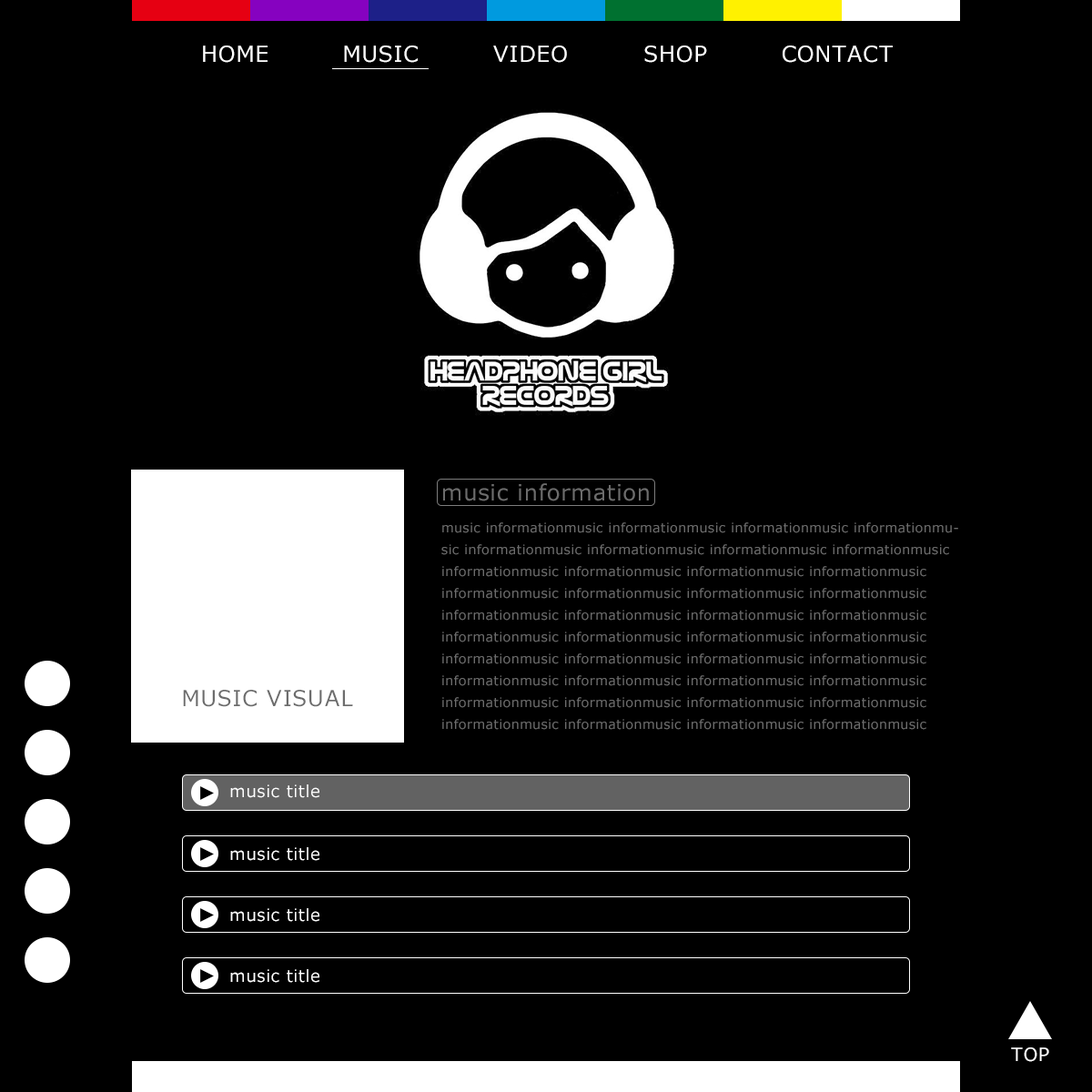
<style>
.page{position:relative;width:1092px;height:1092px;background:#000000}
.page>*{position:absolute;margin:0}
.t1{font:21.8px "Meiryo";letter-spacing:0.05em;color:#ffffff}
.t2{font:21.8px "Meiryo";letter-spacing:0.05em;color:#6c6c6c}
.t3{font:12.7px/21.8px "Meiryo";letter-spacing:0.05em;color:#6c6c6c}
.t4{font:16.4px "Meiryo";letter-spacing:0.05em;color:#ffffff}
.t5{font:18.2px "Meiryo";letter-spacing:0.05em;color:#ffffff}
</style>
<div class="page">
<p class="t1" style="left:203px;top:45px;width:65px;height:18px">HOME</p>
<p class="t1" style="left:344px;top:45px;width:74px;height:18px">MUSIC</p>
<p class="t1" style="left:493px;top:45px;width:74px;height:18px">VIDEO</p>
<p class="t1" style="left:644px;top:45px;width:63px;height:18px">SHOP</p>
<p class="t1" style="left:783px;top:45px;width:110px;height:18px">CONTACT</p>
<p class="t2" style="left:443px;top:483px;width:206px;height:18px">music information</p>
<p class="t3" style="left:441px;top:522px;width:517px;height:208px">music informationmusic informationmusic informationmusic informationmusic informationmusic informationmusic informationmusic informationmusic informationmusic informationmusic informationmusic informationmusic informationmusic informationmusic informationmusic informationmusic informationmusic informationmusic informationmusic informationmusic informationmusic informationmusic informationmusic informationmusic informationmusic informationmusic informationmusic informationmusic informationmusic informationmusic informationmusic informationmusic informationmusic informationmusic informationmusic informationmusic informationmusic informationmusic informationmusic informationmusic informationmusic informationmusic informationmusic information</p>
<p class="t2" style="left:183px;top:690px;width:170px;height:17px">MUSIC VISUAL</p>
<p class="t4" style="left:230px;top:784px;width:89px;height:14px">music title</p>
<p class="t4" style="left:230px;top:847px;width:89px;height:14px">music title</p>
<p class="t4" style="left:230px;top:908px;width:89px;height:14px">music title</p>
<p class="t4" style="left:230px;top:969px;width:89px;height:14px">music title</p>
<p class="t5" style="left:1011px;top:1047px;width:38px;height:15px">TOP</p>
</div>
